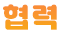
<style>
.page{position:relative;width:60px;height:34px;background:#ffffff}
.page>*{position:absolute;margin:0}
.t1{font:26.7px "Jalnan";letter-spacing:0.08em;color:#f9972b;text-transform:uppercase}
</style>
<div class="page">
<p class="t1" style="left:3px;top:4px;width:54px;height:26px">협력</p>
</div>
